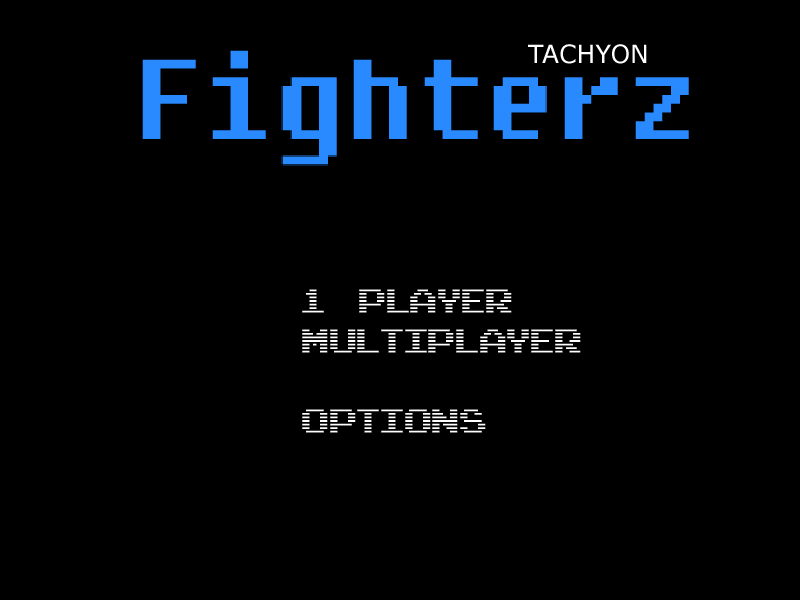
<style>
.page{position:relative;width:800px;height:600px;background:#000000}
.page>*{position:absolute;margin:0}
.t1{font:112.5px "Fixedsys";color:#2989ff}
.t2{font:25px "Verdana";color:#ffffff}
.t3{font:33.3px "Arcade-Classic-Regular";color:#ffffff}
</style>
<div class="page">
<p class="t1" style="left:142px;top:50px;width:547px;height:116px">Fighterz</p>
<p class="t2" style="left:528px;top:44px;width:119px;height:20px">TACHYON</p>
<p class="t3" style="left:302px;top:289px;width:279px;height:144px">1 PLAYER<br>MULTIPLAYER<br><br>OPTIONS</p>
</div>
